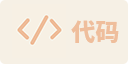
<style>
.page{position:relative;width:128px;height:64px;background:#f6f0e5}
.page>*{position:absolute;margin:0}
.t1{font:24px "SourceHanSansCN-Heavy";color:#efbe9c}
</style>
<div class="page">
<p class="t1" style="left:71px;top:20px;width:48px;height:23px">代码</p>
</div>
